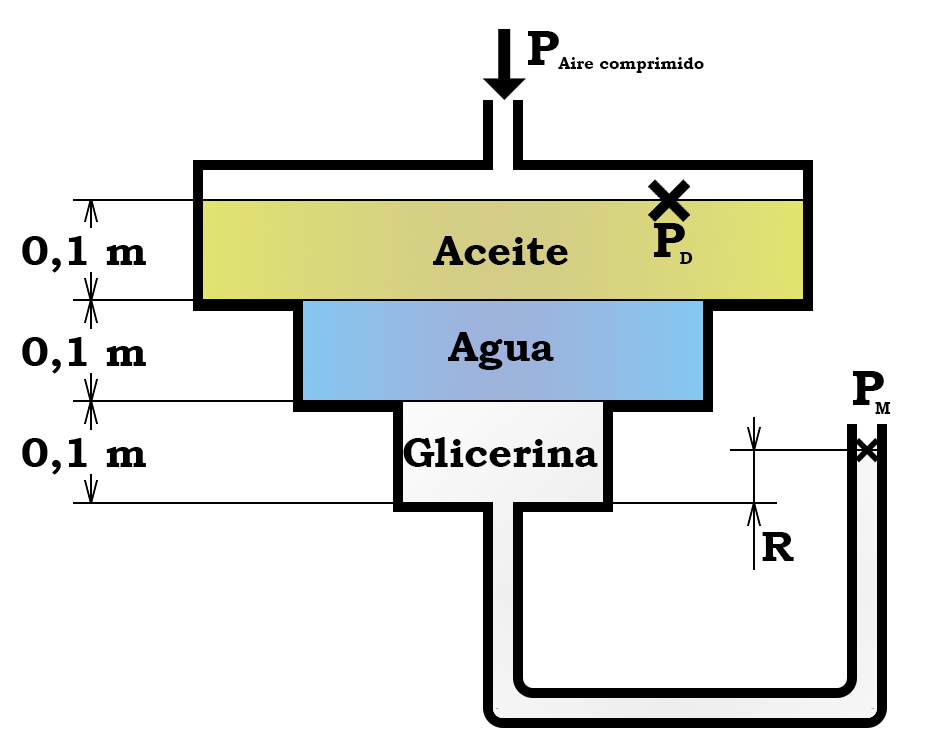
<style>
.page{position:relative;width:930px;height:744px;background:#ffffff}
.page>*{position:absolute;margin:0}
.t1{font:50px "BookmanOldStyle-Bold";color:#000000}
.t2{font:16.7px "BookmanOldStyle-Bold";color:#000000}
.t3{font:41.7px "BookmanOldStyle-Bold";color:#000000}
</style>
<div class="page">
<p class="t1" style="left:528px;top:31px;width:31px;height:34px">P</p>
<p class="t2" style="left:558px;top:57px;width:146px;height:16px">Aire comprimido</p>
<p class="t1" style="left:654px;top:223px;width:31px;height:34px">P</p>
<p class="t3" style="left:433px;top:236px;width:135px;height:29px">Aceite</p>
<p class="t2" style="left:680px;top:252px;width:13px;height:12px">D</p>
<p class="t3" style="left:448px;top:332px;width:106px;height:38px">Agua</p>
<p class="t1" style="left:853px;top:371px;width:31px;height:34px">P</p>
<p class="t2" style="left:875px;top:402px;width:16px;height:12px">M</p>
<p class="t3" style="left:403px;top:437px;width:195px;height:30px">Glicerina</p>
<p class="t3" style="left:762px;top:532px;width:32px;height:29px">R</p>
</div>
